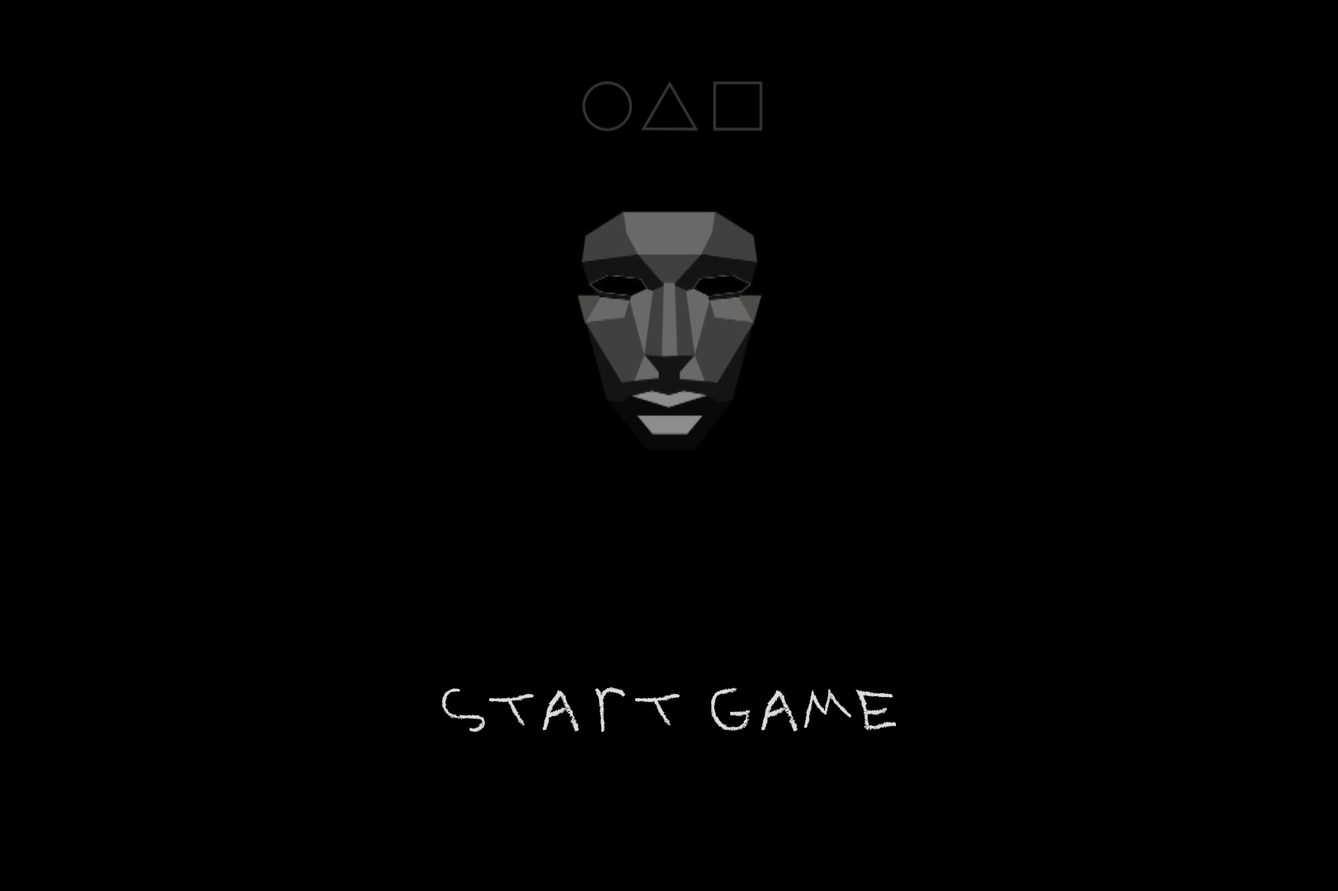
<style>
.page{position:relative;width:1338px;height:891px;background:#000000}
.page>*{position:absolute;margin:0}
.t1{font:87px "Made_Of_Scars";color:#dddddd}
</style>
<div class="page">
<p class="t1" style="left:441px;top:686px;width:456px;height:47px">START GAME</p>
</div>
